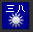
<style>
.page{position:relative;width:33px;height:32px;background:#000090}
.page>*{position:absolute;margin:0}
.t1{font:10.4px "SimSun";color:#ffffff}
</style>
<div class="page">
<p class="t1" style="left:6px;top:5px;width:19px;height:8px">三八</p>
</div>
